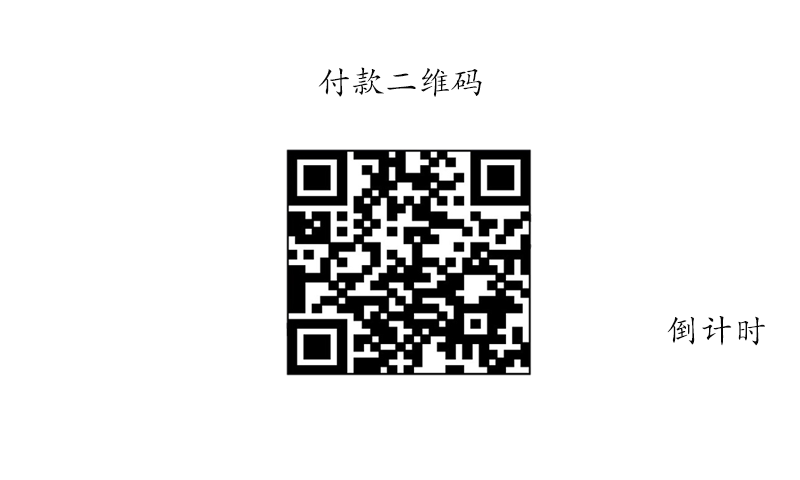
<style>
.page{position:relative;width:800px;height:480px;background:#ffffff}
.page>*{position:absolute;margin:0}
.t1{font:33.3px "STKaiti";color:#070707}
</style>
<div class="page">
<p class="t1" style="left:318px;top:67px;width:164px;height:30px">付款二维码</p>
<p class="t1" style="left:667px;top:316px;width:98px;height:30px">倒计时</p>
</div>
